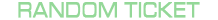
<style>
.page{position:relative;width:218px;height:20px;background:#ffffff}
.page>*{position:absolute;margin:0}
.t1{font:23px "MicrogrammaD-MediExte";letter-spacing:0.075em;color:#94d898;font-weight:bold;scale:0.7 1}
</style>
<div class="page">
<p class="t1" style="left:18px;top:2px;width:182px;height:16px">RANDOM TICKET</p>
</div>
